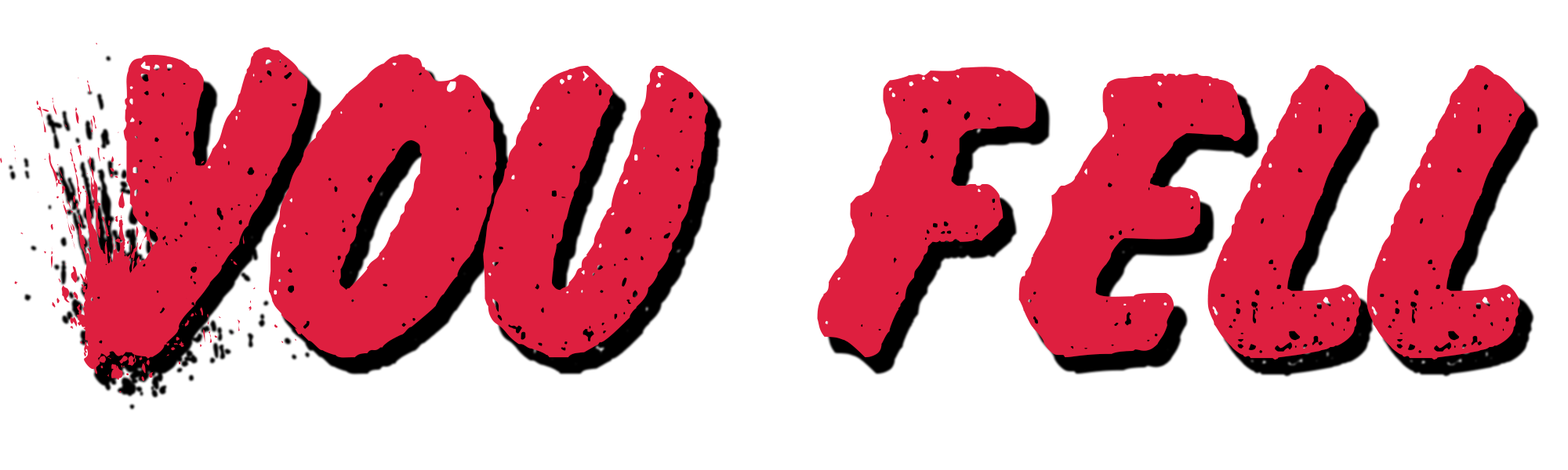
<style>
.page{position:relative;width:1568px;height:470px;background:#ffffff}
.page>*{position:absolute;margin:0}
.t1{font:418.4px "ICELAND";color:#de1f3f}
</style>
<div class="page">
<p class="t1" style="left:0px;top:42px;width:1525px;height:352px">You fell</p>
</div>
